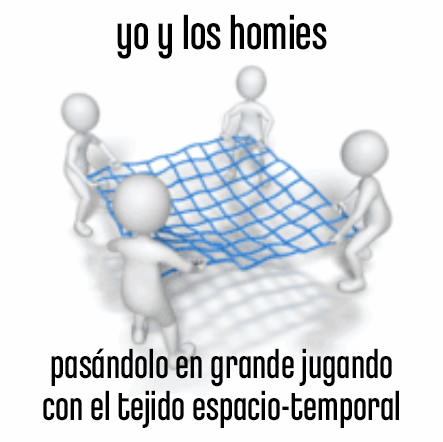
<style>
.page{position:relative;width:443px;height:442px;background:#fefefe}
.page>*{position:absolute;margin:0}
.t1{font:49.6px "ChaletComprime-CologneEighty";color:#000000}
.t2{font:42.1px "ChaletComprime-CologneEighty";color:#000000}
</style>
<div class="page">
<p class="t1" style="left:117px;top:14px;width:210px;height:45px">yo y los homies</p>
<p class="t2" style="left:43px;top:348px;width:356px;height:80px;text-align:center">pasándolo en grande jugando<br>con el tejido espacio-temporal</p>
</div>
